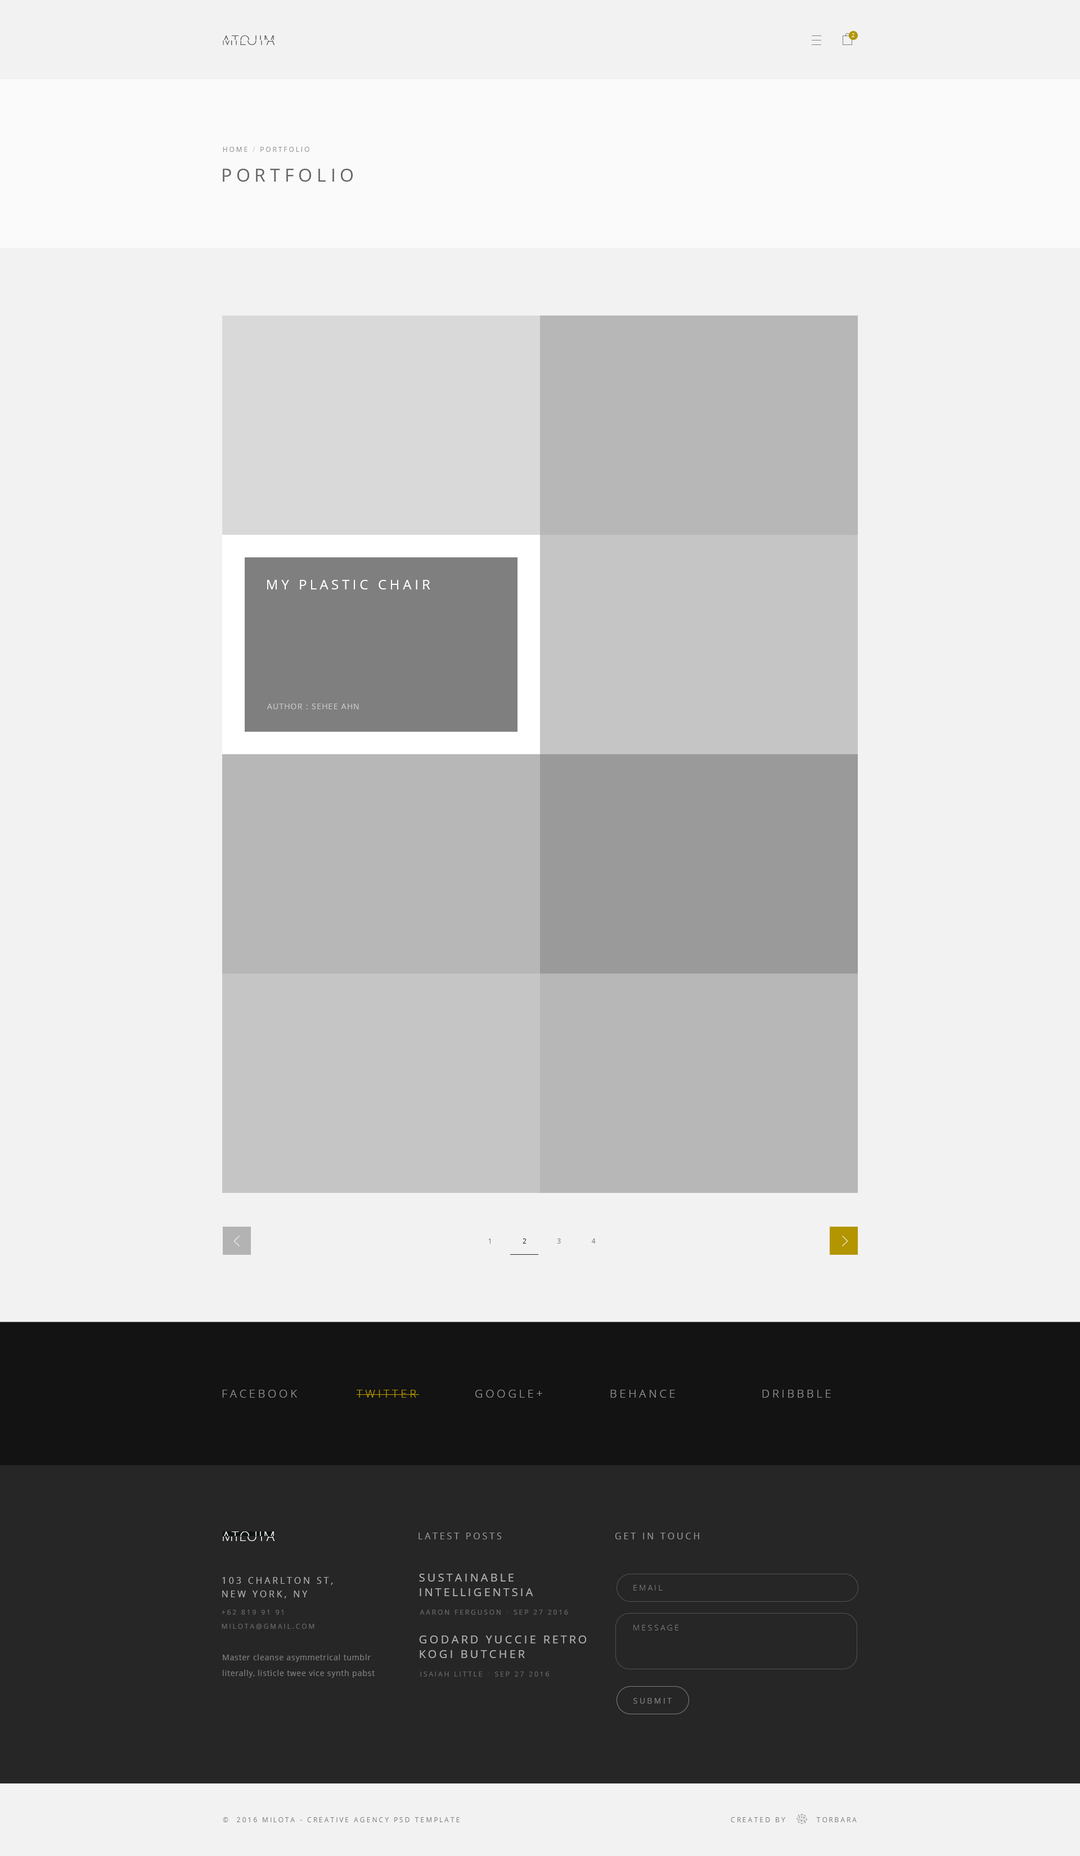
<style>
.page{position:relative;width:1080px;height:1856px;background:#f2f2f2}
.page>*{position:absolute;margin:0}
.t1{font:13.5px "OpenSans-Light";letter-spacing:0.08em;text-transform:uppercase}
.t2{font:5.6px "OpenSans-Light";letter-spacing:0.28em;color:#ffffff;text-transform:uppercase}
.t3{font:6.8px "OpenSans";letter-spacing:0.24em;color:#999999;text-transform:uppercase}
.t4{font:6.8px "OpenSans";letter-spacing:0.24em;color:#cccccc;text-transform:uppercase}
.t5{font:18px "OpenSans";letter-spacing:0.24em;color:#666666;text-transform:uppercase}
.t6{font:13.5px "OpenSans";letter-spacing:0.24em;color:#ffffff;text-transform:uppercase}
.t7{font:7.9px "OpenSans";letter-spacing:0.08em;color:#cccccc;text-transform:uppercase}
.t8{font:6.8px "OpenSans";letter-spacing:0.7em;color:#808080;text-transform:uppercase}
.t9{font:6.8px "OpenSans";letter-spacing:0.7em;color:#262626;text-transform:uppercase}
.t10{font:11.2px "OpenSans-Light";letter-spacing:0.24em;color:#999999;text-transform:uppercase}
.t11{font:11.2px "OpenSans-Light";letter-spacing:0.24em;color:#b39500;text-transform:uppercase}
.t12{font:9px "OpenSans";letter-spacing:0.24em;color:#999999;text-transform:uppercase}
.t13{font:9px/13.5px "OpenSans";letter-spacing:0.24em;color:#b3b3b3;text-transform:uppercase}
.t14{font:11.2px/14.6px "OpenSans";letter-spacing:0.2em;color:#b3b3b3;text-transform:uppercase}
.t15{font:7.9px "OpenSans-Light";letter-spacing:0.24em;color:#808080;text-transform:uppercase}
.t16{font:6.8px "OpenSans";letter-spacing:0.24em;color:#666666;text-transform:uppercase}
.t17{font:6.8px "OpenSans";letter-spacing:0.24em;color:#333333;text-transform:uppercase}
.t18{font:7.9px/15.8px "OpenSans";letter-spacing:0.04em;color:#808080}
.t19{font:7.9px "OpenSans";letter-spacing:0.24em;color:#808080;text-transform:uppercase}
.t20{font:6.8px "OpenSans";letter-spacing:0.24em;color:#808080;text-transform:uppercase}
</style>
<div class="page">
<p class="t1" style="left:222px;top:35px;width:52px;height:10px;rotate:180deg">milota</p>
<p class="t1" style="left:223px;top:35px;width:51px;height:10px">milota</p>
<p class="t2" style="left:852px;top:33px;width:2px;height:4px">2</p>
<p class="t3" style="left:223px;top:147px;width:86px;height:5px">home <span class="t4">/</span> portfolio</p>
<p class="t5" style="left:223px;top:169px;width:130px;height:13px">Portfolio</p>
<p class="t6" style="left:267px;top:580px;width:163px;height:10px">My Plastic Chair</p>
<p class="t7" style="left:267px;top:704px;width:92px;height:5px">Author : Sehee Ahn</p>
<p class="t8" style="left:488px;top:1239px;width:108px;height:5px">1    <span class="t9">2</span>    3    4</p>
<p class="t10" style="left:222px;top:1390px;width:75px;height:8px">facebook</p>
<p class="t11" style="left:357px;top:1390px;width:62px;height:8px">Twitter</p>
<p class="t10" style="left:475px;top:1390px;width:67px;height:8px">Google+</p>
<p class="t10" style="left:610px;top:1390px;width:65px;height:8px">Behance</p>
<p class="t10" style="left:762px;top:1390px;width:69px;height:8px">dribbble</p>
<p class="t1" style="left:222px;top:1532px;width:52px;height:9px;rotate:180deg">milota</p>
<p class="t1" style="left:223px;top:1532px;width:51px;height:9px">milota</p>
<p class="t12" style="left:418px;top:1533px;width:84px;height:7px">Latest posts</p>
<p class="t12" style="left:615px;top:1533px;width:84px;height:7px">Get in touch</p>
<p class="t13" style="left:222px;top:1577px;width:111px;height:22px">103 Charlton St, <br>New York, NY</p>
<p class="t14" style="left:419px;top:1574px;width:114px;height:22px">Sustainable intelligentsia butcher</p>
<p class="t15" style="left:633px;top:1585px;width:30px;height:6px">Email</p>
<p class="t16" style="left:222px;top:1610px;width:62px;height:5px">+62 819 91 91</p>
<p class="t16" style="left:420px;top:1610px;width:148px;height:5px">Aaron Ferguson <span class="t17">/</span> Sep 27 2016</p>
<p class="t16" style="left:222px;top:1624px;width:92px;height:6px">milota@gmail.com</p>
<p class="t15" style="left:633px;top:1625px;width:45px;height:6px">Message</p>
<p class="t14" style="left:419px;top:1636px;width:167px;height:22px">Godard yuccie retro kogi butcher</p>
<p class="t18" style="left:223px;top:1654px;width:152px;height:24px">Master cleanse asymmetrical tumblr literally, listicle twee vice synth pabst<br> fixie etsy squid.</p>
<p class="t16" style="left:420px;top:1672px;width:129px;height:5px">Isaiah Little <span class="t17">/</span> Sep 27 2016</p>
<p class="t19" style="left:633px;top:1698px;width:39px;height:6px">submit</p>
<p class="t20" style="left:223px;top:1817px;width:237px;height:5px">©  2016 MIlota - Creative agency psd template</p>
<p class="t20" style="left:731px;top:1817px;width:126px;height:5px">Created by         Torbara</p>
</div>
